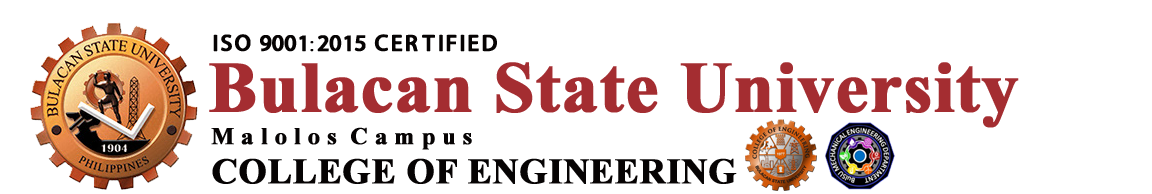
<style>
.page{position:relative;width:1152px;height:194px;background:#ffffff}
.page>*{position:absolute;margin:0}
.t1{font:24px "extravaganzza-Bold";color:#060303;font-weight:bold}
.t2{font:72px "TimesNewRomanPS-BoldMT";color:#a42d31;font-weight:bold}
.t3{font:24px "TimesNewRomanPS-BoldMT";color:#060303;font-weight:bold}
.t4{font:36px "TimesNewRomanPS-BoldMT";color:#060303;font-weight:bold}
</style>
<div class="page">
<p class="t1" style="left:213px;top:34px;width:284px;height:18px">ISO 9001:2015 CERTIFIED</p>
<p class="t2" style="left:209px;top:62px;width:810px;height:66px">Bulacan State University</p>
<p class="t3" style="left:211px;top:127px;width:261px;height:23px">M a l o l o s  C a m p u s</p>
<p class="t4" style="left:212px;top:158px;width:525px;height:26px">COLLEGE OF ENGINEERING</p>
</div>
